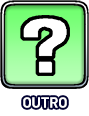
<style>
.page{position:relative;width:89px;height:116px;background:#ffffff}
.page>*{position:absolute;margin:0}
.t1{font:14.7px "Barlow-Bold";color:#ffffff}
</style>
<div class="page">
<p class="t1" style="left:23px;top:97px;width:44px;height:11px">OUTRO</p>
</div>
